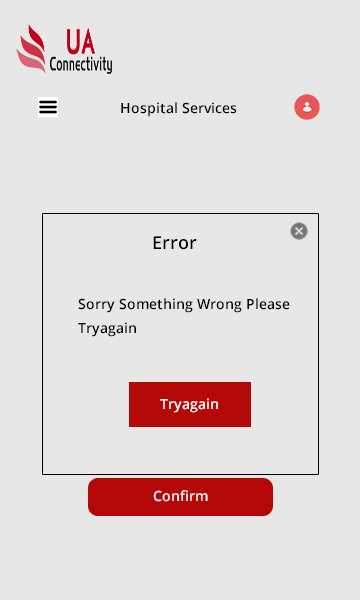
<style>
.page{position:relative;width:360px;height:600px;background:#e7e7e7}
.page>*{position:absolute;margin:0}
.t1{font:14px "OpenSans-Semibold";color:#030000}
.t2{font:18px "OpenSans-Semibold";color:#030000}
.t3{font:14px/6px "OpenSans-Semibold";color:#030000}
.t4{font:14px "OpenSans-Semibold";color:#ffffff}
.t5{font:14px "OpenSans-Semibold";color:#f9f5f5}
</style>
<div class="page">
<p class="t1" style="left:121px;top:102px;width:116px;height:15px">Hospital Services</p>
<p class="t2" style="left:153px;top:236px;width:44px;height:14px"><span class="t1"><br><br>                    </span>    Error</p>
<p class="t3" style="left:78px;top:298px;width:212px;height:39px">Sorry Something Wrong Please<br><br><br><br>Tryagain</p>
<p class="t4" style="left:160px;top:398px;width:58px;height:15px"><span class="t1"><br> <br><br>  </span>Tryagain</p>
<p class="t5" style="left:153px;top:490px;width:55px;height:12px">Confirm</p>
</div>
